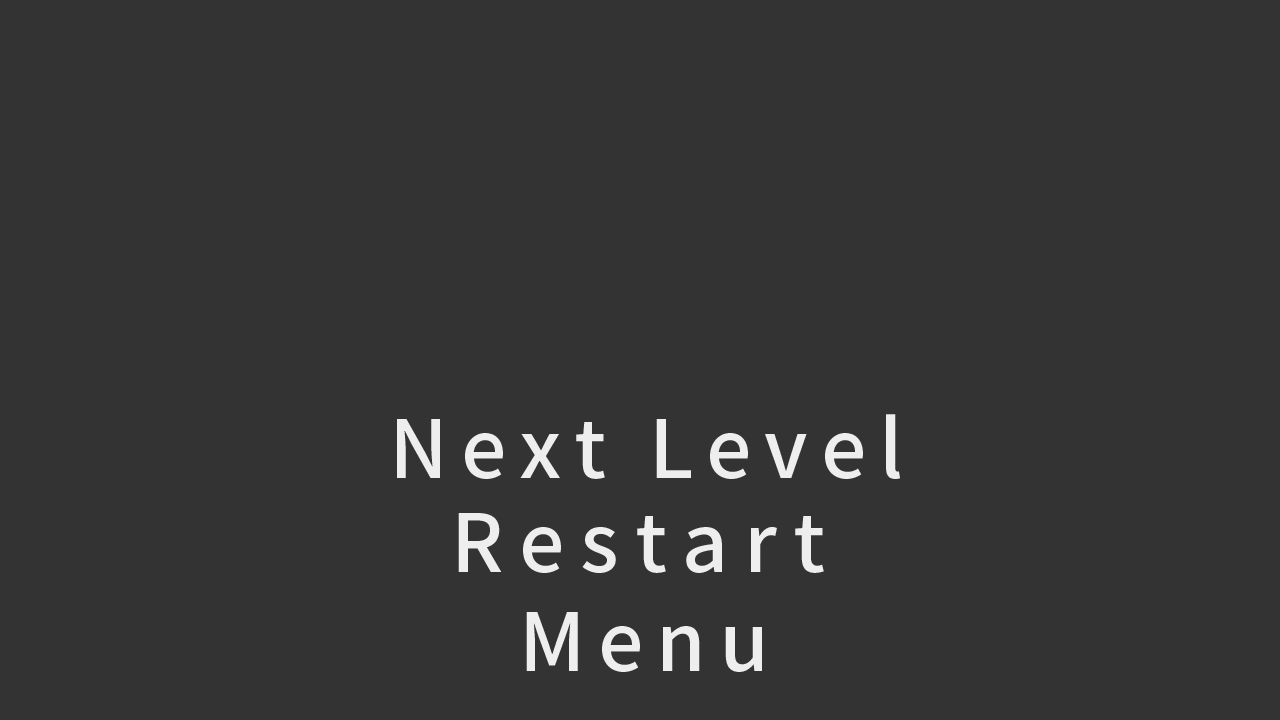
<style>
.page{position:relative;width:1280px;height:720px;background:#333333}
.page>*{position:absolute;margin:0}
.t1{font:80px "SourceHanSansJP-Medium";letter-spacing:0.16em;color:#eeeeee}
.t2{font:80px "SourceHanSansJP-Medium";letter-spacing:0.2em;color:#eeeeee}
</style>
<div class="page">
<p class="t1" style="left:397px;top:414px;width:503px;height:65px">Next Level</p>
<p class="t2" style="left:458px;top:513px;width:366px;height:60px">Restart</p>
<p class="t1" style="left:526px;top:612px;width:236px;height:60px">Menu</p>
</div>
